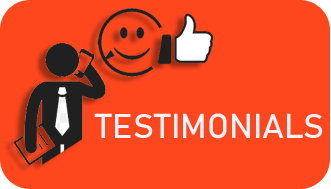
<style>
.page{position:relative;width:331px;height:189px;background:#ff471e}
.page>*{position:absolute;margin:0}
.t1{font:34.2px "Bahnschrift";color:#fbf1fb}
</style>
<div class="page">
<p class="t1" style="left:94px;top:113px;width:229px;height:26px">TESTIMONIALS</p>
</div>
